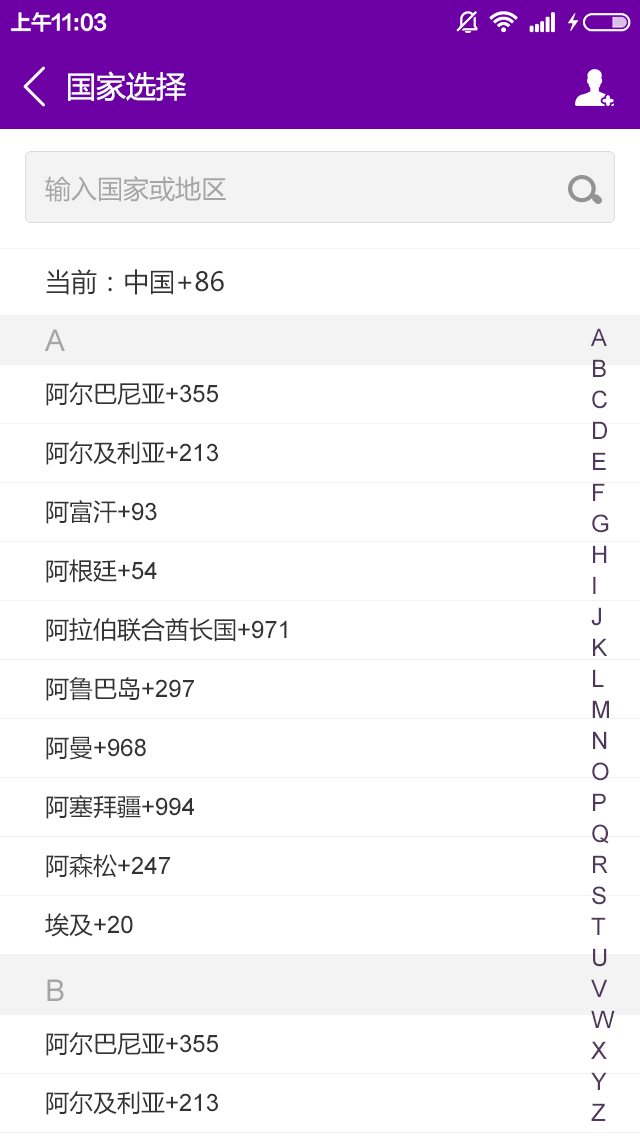
<style>
.page{position:relative;width:640px;height:1136px;background:#ffffff}
.page>*{position:absolute;margin:0}
.t1{font:30px "MicrosoftYaHei";color:#ffffff}
.t2{font:26px "MicrosoftYaHei";color:#a5a5a5}
.t3{font:26px "MicrosoftYaHei";color:#333333}
.t4{font:30px "ArialMT";color:#a5a5a5}
.t5{font:24px/31px "ArialMT";color:#4f385c}
.t6{font:24px/59px "MicrosoftYaHei";color:#333333}
.t7{font:24px/59px "ArialMT";color:#333333}
</style>
<div class="page">
<p class="t1" style="left:68px;top:71px;width:118px;height:30px">国家选择</p>
<p class="t2" style="left:45px;top:176px;width:181px;height:26px">输入国家或地区</p>
<p class="t3" style="left:46px;top:269px;width:178px;height:26px">当前：中国+86</p>
<p class="t4" style="left:45px;top:329px;width:20px;height:22px">A</p>
<p class="t5" style="left:591px;top:328px;width:24px;height:793px">A<br>B<br>C<br>D<br>E<br>F<br>G<br>H<br>I<br>J<br>K<br>L<br>M<br>N<br>O<br>P<br>Q<br>R<br>S<br>T<br>U<br>V<br>W<br>X<br>Y<br>Z</p>
<p class="t6" style="left:45px;top:382px;width:242px;height:555px">阿尔巴尼亚<span class="t7">+355<br></span>阿尔及利亚<span class="t7">+213<br></span>阿富汗<span class="t7">+93<br></span>阿根廷<span class="t7">+54<br></span>阿拉伯联合酋长国<span class="t7">+971<br></span>阿鲁巴岛<span class="t7">+297<br></span>阿曼<span class="t7">+968<br></span>阿塞拜疆<span class="t7">+994<br></span>阿森松<span class="t7">+247<br></span>埃及<span class="t7">+20</span></p>
<p class="t4" style="left:47px;top:979px;width:17px;height:22px">B</p>
</div>
